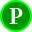
<style>
.page{position:relative;width:32px;height:32px;background:#009600}
.page>*{position:absolute;margin:0}
.t1{font:20.8px "NotoSerifKR-Black";color:#ffffff}
</style>
<div class="page">
<p class="t1" style="left:9px;top:8px;width:14px;height:16px">P</p>
</div>
